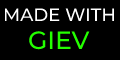
<style>
.page{position:relative;width:120px;height:60px;background:#000000}
.page>*{position:absolute;margin:0}
.t1{font:18px "Montserrat-Medium";color:#ffffff}
.t2{font:25px "Montserrat-Medium";color:#24ff00}
</style>
<div class="page">
<p class="t1" style="left:4px;top:8px;width:111px;height:13px">MADE WITH</p>
<p class="t2" style="left:29px;top:31px;width:61px;height:19px">GIEV</p>
</div>
